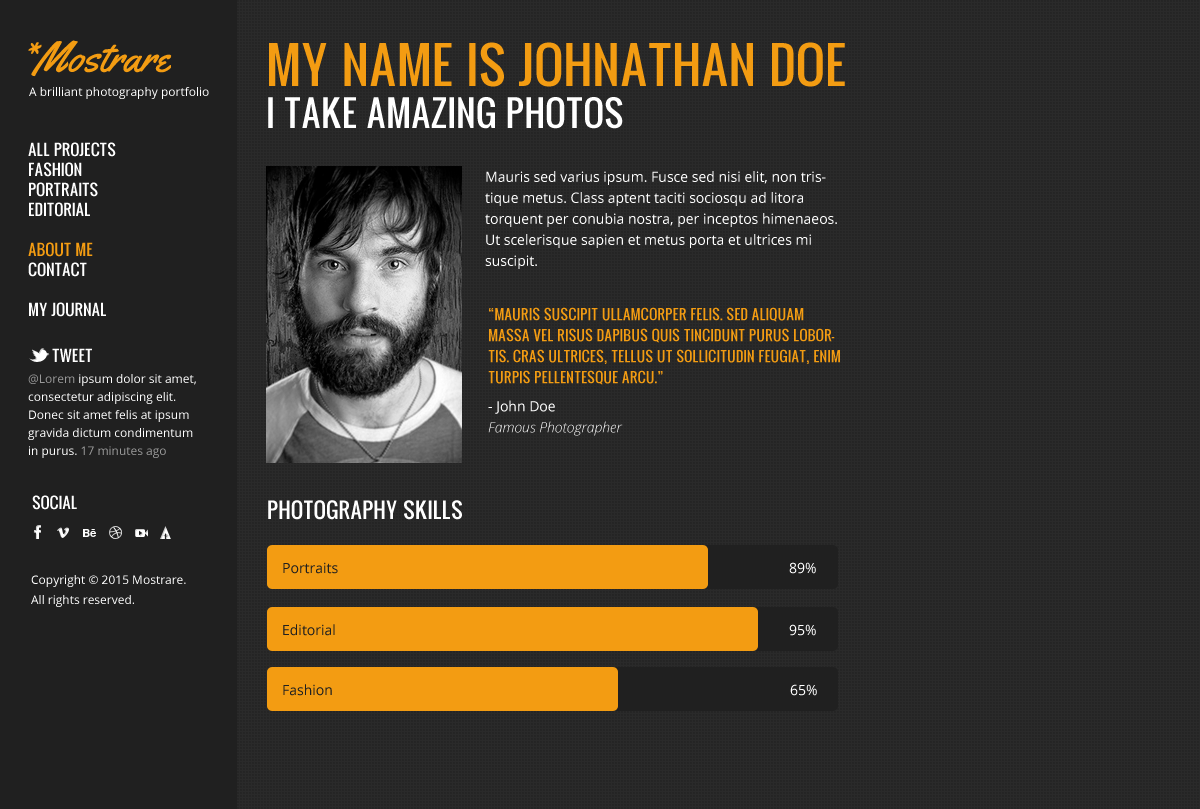
<style>
.page{position:relative;width:1200px;height:809px;background:#2a2a2a}
.page>*{position:absolute;margin:0}
.t1{font:42.7px "Yellowtail";color:#f39c12}
.t2{font:49px/42px "Oswald";color:#f39c12;text-transform:uppercase}
.t3{font:35px/42px "Oswald";color:#ffffff;text-transform:uppercase}
.t4{font:12px "OpenSans";color:#ffffff}
.t5{font:15.1px/20px "Oswald";color:#ffffff;text-transform:uppercase}
.t6{font:15.1px/20px "Oswald";color:#f39c12;text-transform:uppercase}
.t7{font:14px/21px "OpenSans";color:#ffffff}
.t8{font:14px/21px "Oswald";color:#f39c12;text-transform:uppercase}
.t9{font:14px/28px "OpenSans";color:#ffffff}
.t10{font:14px/21px "OpenSansLight-Italic";color:#ffffff}
.t11{font:15.1px "Oswald";color:#ffffff;text-transform:uppercase}
.t12{font:12px/18px "OpenSans";color:#ffffff}
.t13{font:12px/18px "OpenSans";color:#999999}
.t14{font:21px "Oswald";color:#ffffff;text-transform:uppercase}
.t15{font:14px "OpenSans";color:#202020}
.t16{font:14px "OpenSans";color:#ffffff}
.t17{font:12px/20px "OpenSans";color:#ffffff}
</style>
<div class="page">
<p class="t1" style="left:28px;top:40px;width:144px;height:37px">*Mostrare</p>
<p class="t2" style="left:268px;top:42px;width:577px;height:87px">My Name is Johnathan Doe<br><span class="t3">I take Amazing Photos</span></p>
<p class="t4" style="left:29px;top:87px;width:180px;height:12px">A brilliant photography portfolio</p>
<p class="t5" style="left:28px;top:142px;width:88px;height:175px">All Projects<br>Fashion<br>Portraits<br>Editorial<br><br><span class="t6">About Me<br></span>Contact<br><br>My Journal</p>
<p class="t7" style="left:485px;top:171px;width:352px;height:98px">Mauris sed varius ipsum. Fusce sed nisi elit, non tristique metus. Class aptent taciti sociosqu ad litora torquent per conubia nostra, per inceptos himenaeos. Ut scelerisque sapien et metus porta et ultrices mi suscipit.</p>
<p class="t8" style="left:488px;top:307px;width:352px;height:129px">“Mauris suscipit ullamcorper felis. Sed aliquam massa vel risus dapibus quis tincidunt purus lobortis. Cras ultrices, tellus ut sollicitudin feugiat, enim turpis pellentesque arcu.”<br><span class="t9">- John Doe<br></span><span class="t10">Famous Photographer</span></p>
<p class="t11" style="left:52px;top:348px;width:40px;height:14px">Tweet</p>
<p class="t12" style="left:28px;top:374px;width:168px;height:84px"><span class="t13">@Lorem</span> ipsum dolor sit amet, consectetur adipiscing elit. Donec sit amet felis at ipsum gravida dictum condimentum in purus. <span class="t13">17 minutes ago</span></p>
<p class="t11" style="left:32px;top:495px;width:45px;height:15px">Social</p>
<p class="t14" style="left:268px;top:500px;width:194px;height:20px">Photography Skills</p>
<p class="t15" style="left:283px;top:562px;width:55px;height:12px">Portraits</p>
<p class="t16" style="left:789px;top:562px;width:27px;height:12px">89%</p>
<p class="t17" style="left:31px;top:575px;width:155px;height:32px">Copyright © 2015 Mostrare.<br>All rights reserved.</p>
<p class="t15" style="left:283px;top:624px;width:52px;height:12px">Editorial</p>
<p class="t16" style="left:789px;top:624px;width:27px;height:12px">95%</p>
<p class="t15" style="left:283px;top:684px;width:49px;height:12px">Fashion</p>
<p class="t16" style="left:790px;top:684px;width:27px;height:12px">65%</p>
</div>
